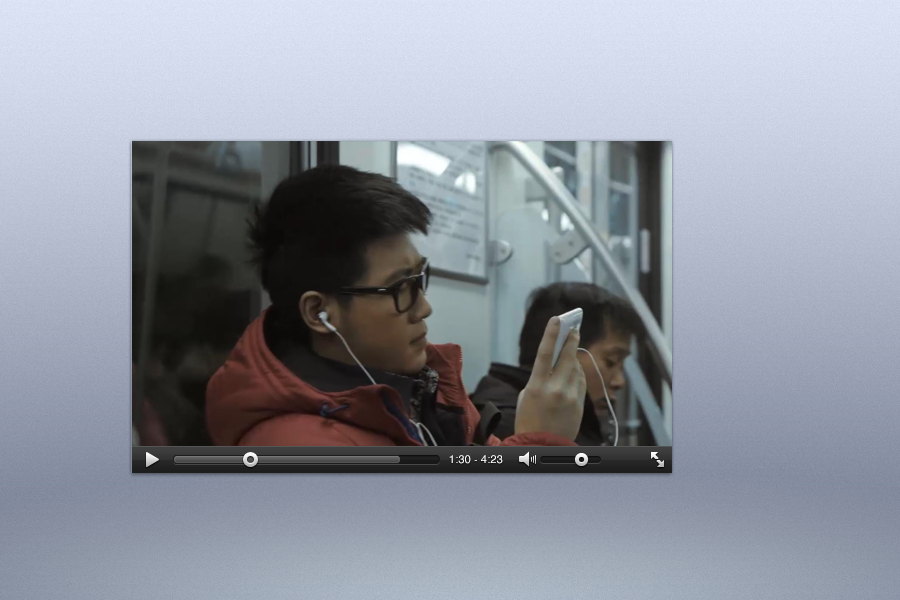
<style>
.page{position:relative;width:900px;height:600px}
.page>*{position:absolute;margin:0}
.t1{font:11px "Helvetica";letter-spacing:0.02em;color:#ffffff}
.t2{font:9px "Helvetica";letter-spacing:0.02em;color:#ffffff}
</style>
<div class="page">
<p class="t1" style="left:449px;top:455px;width:54px;height:9px">1:30 <span class="t2">-</span> 4:23</p>
</div>
